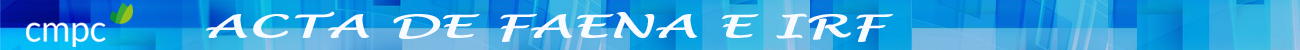
<style>
.page{position:relative;width:1300px;height:50px}
.page>*{position:absolute;margin:0}
.t1{font:30.9px "LucidaHandwriting-Italic";color:#f7fbff;font-weight:bold;scale:1.78 1}
</style>
<div class="page">
<p class="t1" style="left:206px;top:11px;width:687px;height:31px">ACTA DE FAENA E IRF</p>
</div>
